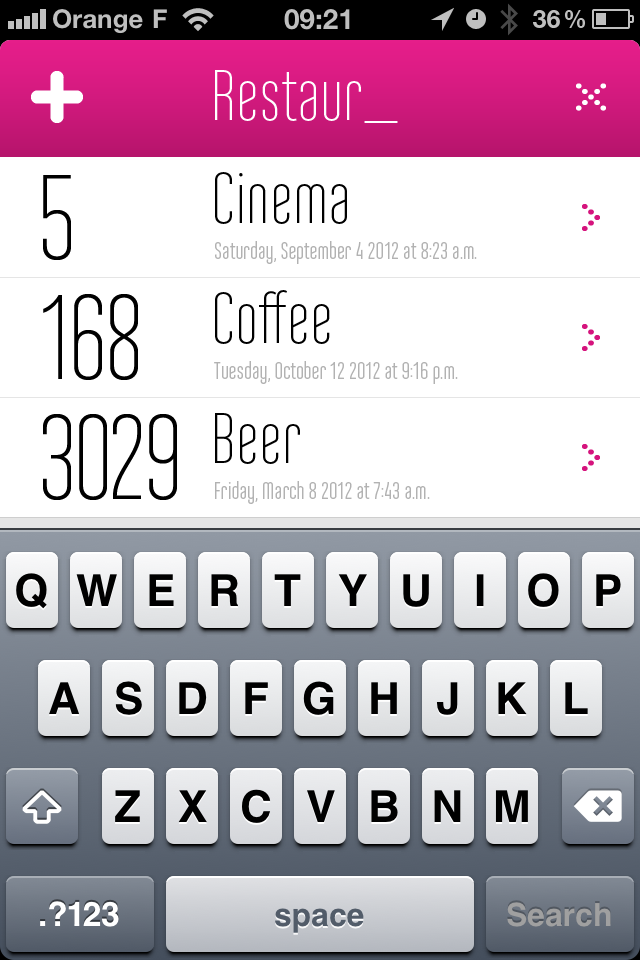
<style>
.page{position:relative;width:640px;height:960px;background:#ffffff}
.page>*{position:absolute;margin:0}
.t1{font:72px "AndoLight";color:#ffffff}
.t2{font:72px "AndoLight";color:#000000}
.t3{font:120px "AndoLight";letter-spacing:-0.05em;color:#000000}
.t4{font:24px "Ando";color:#b2b2b2}
</style>
<div class="page">
<p class="t1" style="left:215px;top:70px;width:183px;height:53px">Restaur_</p>
<p class="t2" style="left:215px;top:172px;width:132px;height:52px">Cinema</p>
<p class="t3" style="left:43px;top:175px;width:28px;height:85px">5</p>
<p class="t4" style="left:215px;top:241px;width:262px;height:23px">Saturday, September 4 2012 at 8:23 a.m.</p>
<p class="t3" style="left:43px;top:294px;width:95px;height:86px">168</p>
<p class="t2" style="left:215px;top:290px;width:115px;height:54px">Coffee</p>
<p class="t4" style="left:214px;top:361px;width:244px;height:23px">Tuesday, October 12 2012 at 9:16 p.m.</p>
<p class="t3" style="left:43px;top:414px;width:134px;height:86px">3029</p>
<p class="t2" style="left:215px;top:413px;width:85px;height:51px">Beer</p>
<p class="t4" style="left:215px;top:481px;width:215px;height:23px">Friday, March 8 2012 at 7:43 a.m.</p>
</div>
